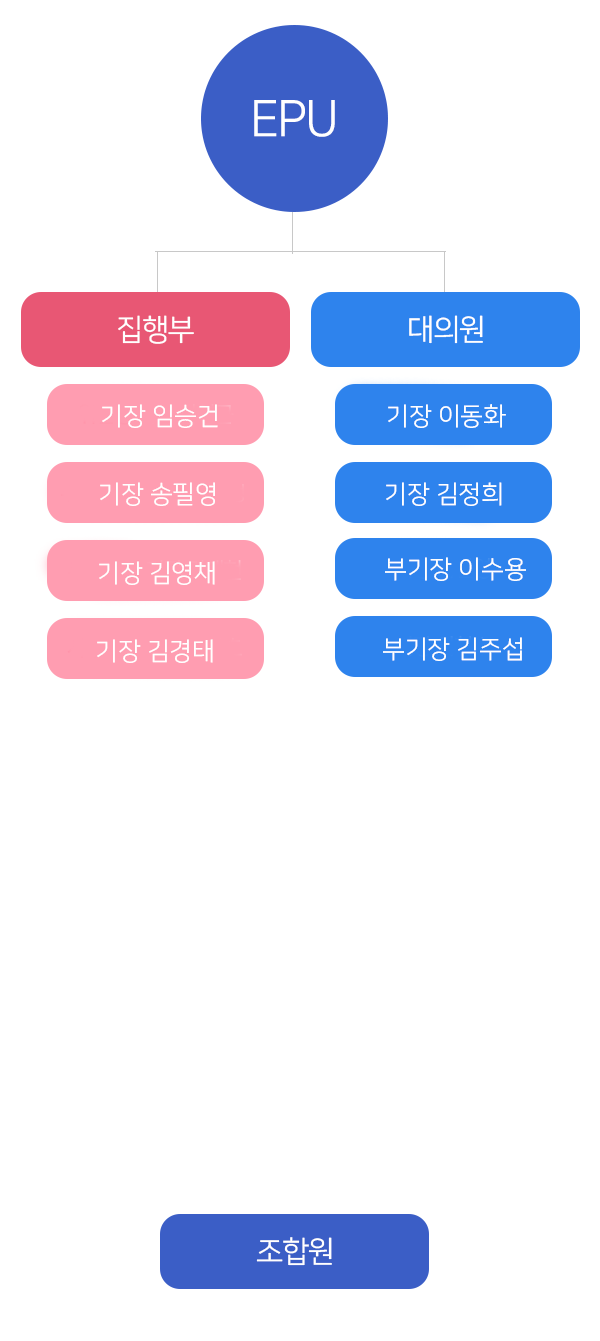
<style>
.page{position:relative;width:600px;height:1341px;background:#ffffff}
.page>*{position:absolute;margin:0}
.t1{font:25px "NanumSquareOTFR";color:#ffffff}
</style>
<div class="page">
<p class="t1" style="left:102px;top:404px;width:116px;height:24px">기장 임승건</p>
<p class="t1" style="left:388px;top:404px;width:118px;height:24px">기장 이동화</p>
<p class="t1" style="left:100px;top:482px;width:115px;height:24px">기장 송필영</p>
<p class="t1" style="left:386px;top:482px;width:116px;height:24px">기장 김정희</p>
<p class="t1" style="left:385px;top:557px;width:141px;height:24px">부기장 이수용</p>
<p class="t1" style="left:99px;top:561px;width:116px;height:24px">기장 김영채</p>
<p class="t1" style="left:97px;top:639px;width:116px;height:24px">기장 김경태</p>
<p class="t1" style="left:383px;top:637px;width:139px;height:24px">부기장 김주섭</p>
</div>
